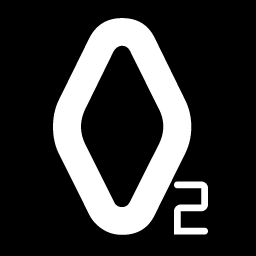
<style>
.page{position:relative;width:256px;height:256px;background:#000000}
.page>*{position:absolute;margin:0}
.t1{font:333.8px "OCRAExtended";color:#ffffff}
.t2{font:81.5px "OCRAExtended";color:#ffffff}
</style>
<div class="page">
<p class="t1" style="left:53px;top:18px;width:139px;height:217px">O</p>
<p class="t2" style="left:174px;top:181px;width:34px;height:54px">2</p>
</div>
